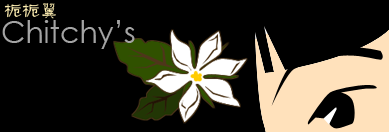
<style>
.page{position:relative;width:389px;height:132px;background:#000000}
.page>*{position:absolute;margin:0}
.t1{font:18px "FZGLFW--GB1-0";color:#ffefb2}
.t2{font:30px "CenturyGothic";color:#a4a4a4}
</style>
<div class="page">
<p class="t1" style="left:4px;top:3px;width:52px;height:16px">栀栀翼</p>
<p class="t2" style="left:2px;top:20px;width:133px;height:29px">Chitchy’s</p>
</div>
